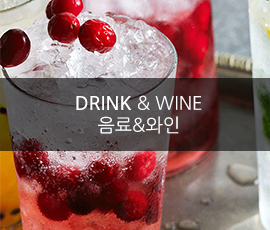
<style>
.page{position:relative;width:270px;height:230px}
.page>*{position:absolute;margin:0}
.t1{font:18.4px "NanumGothic";color:#ffffff}
.t2{font:18.4px "NanumGothic";color:#ffffff;font-weight:bold}
</style>
<div class="page">
<p class="t1" style="left:76px;top:95px;width:126px;height:39px;text-align:center"><span class="t2">DRINK</span> &amp; WINE<br>음료&amp;와인</p>
</div>
